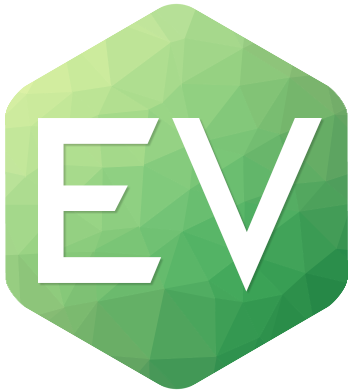
<style>
.page{position:relative;width:352px;height:392px;background:#ffffff}
.page>*{position:absolute;margin:0}
.t1{font:284.2px "ChargerExBd";letter-spacing:0.04em;color:#ffffff;scale:0.92 1}
</style>
<div class="page">
<p class="t1" style="left:38px;top:118px;width:284px;height:174px">EV</p>
</div>
